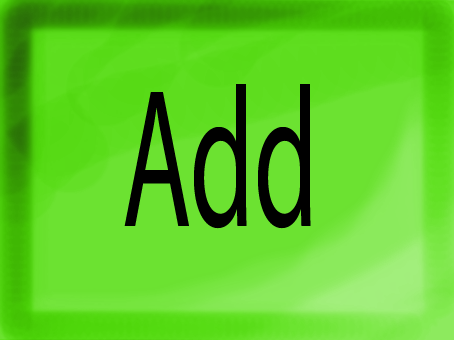
<style>
.page{position:relative;width:454px;height:340px;background:#6ce231}
.page>*{position:absolute;margin:0}
.t1{font:199.5px "MyriadPro-Regular";color:#000000;scale:0.57 1}
</style>
<div class="page">
<p class="t1" style="left:124px;top:84px;width:187px;height:145px">Add</p>
</div>
